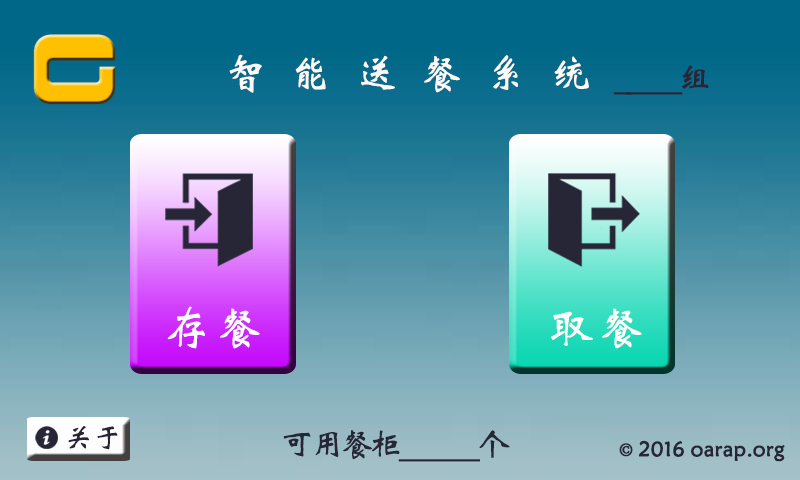
<style>
.page{position:relative;width:800px;height:480px}
.page>*{position:absolute;margin:0}
.t1{font:41.7px "STXinwei";letter-spacing:0.56em;color:#fdf9f9}
.t2{font:33.3px "STXinwei";letter-spacing:-0.12em;color:#272636}
.t3{font:45.8px "STXinwei";letter-spacing:0.1em;color:#fcfcfc}
.t4{font:29.6px "STXinwei";color:#272636}
.t5{font:20.8px "STXinwei";color:#272636;font-weight:bold}
.t6{font:20.8px "AdobeSongStd-Light";color:#272636;font-weight:bold}
</style>
<div class="page">
<p class="t1" style="left:229px;top:54px;width:360px;height:39px">智能送餐系统</p>
<p class="t2" style="left:613px;top:65px;width:96px;height:30px">_____组</p>
<p class="t3" style="left:167px;top:306px;width:93px;height:43px">存餐</p>
<p class="t3" style="left:551px;top:308px;width:91px;height:41px">取餐</p>
<p class="t4" style="left:68px;top:426px;width:50px;height:24px">关于</p>
<p class="t2" style="left:283px;top:430px;width:227px;height:32px">可用餐柜______个</p>
<p class="t5" style="left:619px;top:440px;width:166px;height:22px"><span class="t6">© </span>2016 oarap.org</p>
</div>
